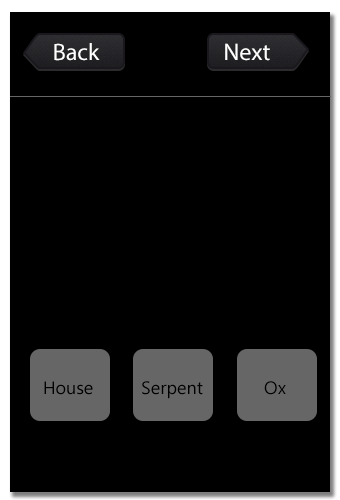
<style>
.page{position:relative;width:340px;height:500px;background:#000000}
.page>*{position:absolute;margin:0}
.t1{font:24px "MyriadPro-Regular";color:#ffffff}
.t2{font:18px "SegoeUI";color:#000000}
</style>
<div class="page">
<p class="t1" style="left:54px;top:43px;width:46px;height:18px">Back</p>
<p class="t1" style="left:225px;top:43px;width:45px;height:18px">Next</p>
<p class="t2" style="left:44px;top:381px;width:49px;height:14px">House</p>
<p class="t2" style="left:142px;top:381px;width:61px;height:18px">Serpent</p>
<p class="t2" style="left:264px;top:381px;width:22px;height:14px">Ox</p>
</div>
